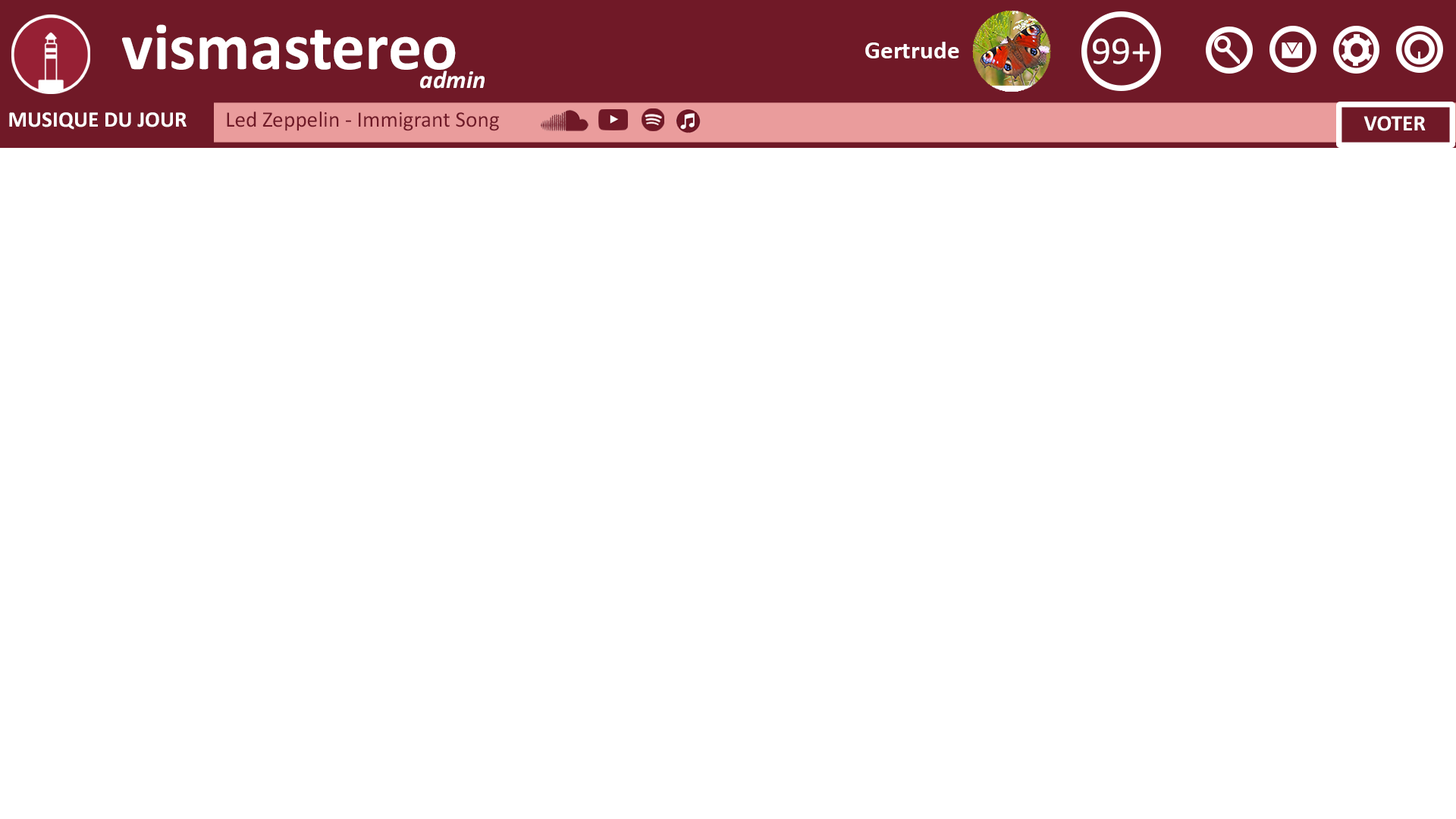
<style>
.page{position:relative;width:1456px;height:819px;background:#ffffff}
.page>*{position:absolute;margin:0}
.t1{font:66.8px "Calibri-Bold";color:#ffffff}
.t2{font:25.3px "Calibri-Bold";color:#ffffff}
.t3{font:39.2px "Calibri";color:#ffffff}
.t4{font:25px "Calibri-BoldItalic";color:#ffffff}
.t5{font:22.3px "Calibri-Bold";color:#ffffff}
.t6{font:22.3px "Calibri";color:#701927}
</style>
<div class="page">
<p class="t1" style="left:122px;top:24px;width:334px;height:46px">vismastereo</p>
<p class="t2" style="left:865px;top:42px;width:94px;height:16px">Gertrude</p>
<p class="t3" style="left:1093px;top:38px;width:57px;height:26px">99+</p>
<p class="t4" style="left:420px;top:71px;width:65px;height:18px">admin</p>
<p class="t5" style="left:9px;top:112px;width:178px;height:18px">MUSIQUE DU JOUR</p>
<p class="t6" style="left:227px;top:111px;width:272px;height:20px">Led Zeppelin - Immigrant Song</p>
<p class="t5" style="left:1363px;top:116px;width:63px;height:15px">VOTER</p>
</div>
